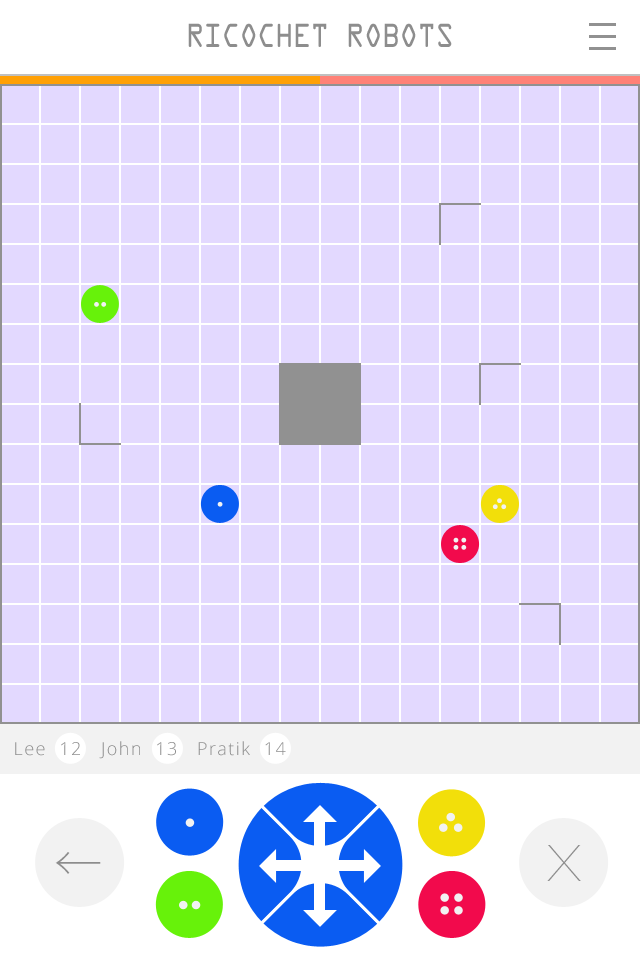
<style>
.page{position:relative;width:640px;height:960px;background:#e3d9ff}
.page>*{position:absolute;margin:0}
.t1{font:30px "OCRAStd";letter-spacing:-0.06em;color:#8d8d8d;scale:0.9 1}
.t2{font:18px "OpenSans-Light";letter-spacing:0.08em;color:#8d8d8d}
.t3{font:72px "Gotham-Thin";letter-spacing:0.08em;color:#8d8d8d}
.t4{font:48px "KozGoPr6N-ExtraLight";letter-spacing:0.08em;color:#8d8d8d}
</style>
<div class="page">
<p class="t1" style="left:188px;top:23px;width:264px;height:24px">RICOCHET ROBOTS</p>
<p class="t2" style="left:15px;top:741px;width:271px;height:18px">Lee  12   John  13   Pratik  14</p>
<p class="t3" style="left:547px;top:845px;width:34px;height:36px">x</p>
<p class="t4" style="left:55px;top:852px;width:46px;height:22px">←</p>
</div>
